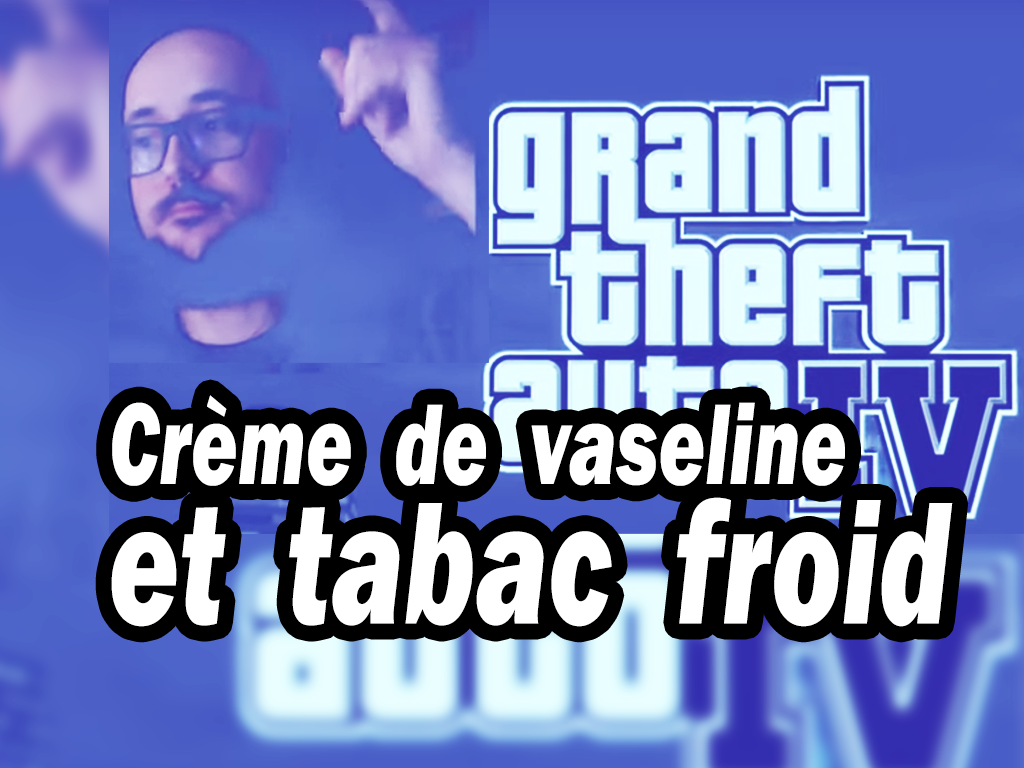
<style>
.page{position:relative;width:1024px;height:768px}
.page>*{position:absolute;margin:0}
.t1{font:118.7px/89px "FranklinGothic-HeavyItalic";letter-spacing:0.01em;color:#ffffff;scale:0.67 1}
.t2{font:180.4px/89px "FranklinGothic-HeavyItalic";letter-spacing:0.01em;color:#ffffff;scale:0.67 1}
</style>
<div class="page">
<p class="t1" style="left:111px;top:395px;width:842px;height:232px">Crème  de  vaseline<br><span class="t2">et  tabac  froid</span></p>
</div>
